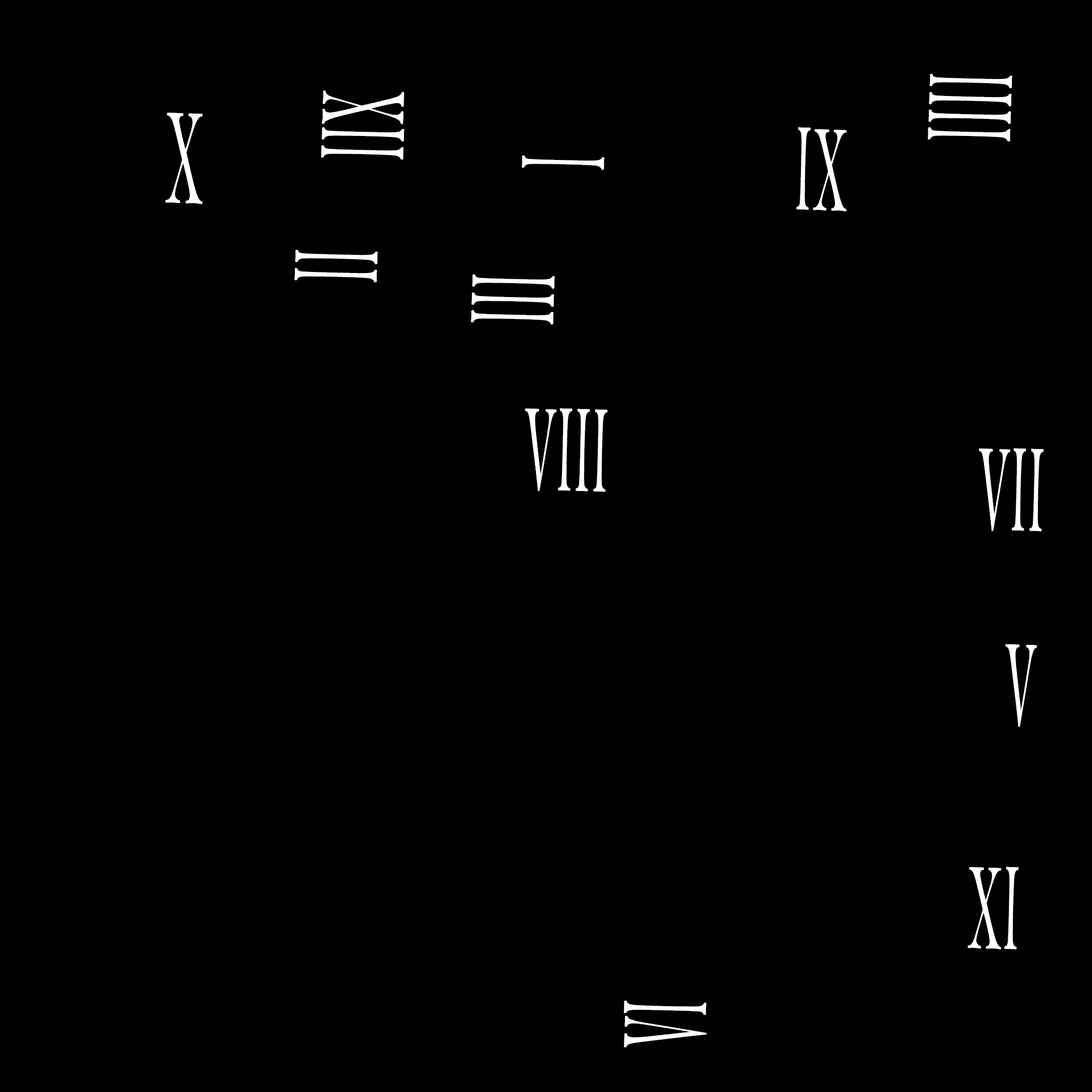
<style>
.page{position:relative;width:1092px;height:1092px;background:#000000}
.page>*{position:absolute;margin:0}
.t1{font:127.1px "BellMT";color:#ffffff;scale:0.37 1}
.t2{font:141.3px "BellMT";color:#ffffff;scale:0.37 1}
</style>
<div class="page">
<p class="t1" style="left:928px;top:74px;width:85px;height:68px;rotate:92deg">IIII</p>
<p class="t1" style="left:321px;top:91px;width:83px;height:69px;rotate:92deg">XII</p>
<p class="t2" style="left:165px;top:113px;width:38px;height:91px;rotate:2deg">X</p>
<p class="t1" style="left:796px;top:127px;width:51px;height:85px;rotate:2deg">IX</p>
<p class="t1" style="left:521px;top:155px;width:84px;height:15px;rotate:92deg">I</p>
<p class="t1" style="left:294px;top:250px;width:84px;height:33px;rotate:92deg">II</p>
<p class="t1" style="left:471px;top:274px;width:84px;height:51px;rotate:92deg">III</p>
<p class="t1" style="left:525px;top:408px;width:83px;height:84px;rotate:2deg">VIII</p>
<p class="t1" style="left:978px;top:448px;width:66px;height:84px;rotate:2deg">VII</p>
<p class="t1" style="left:1005px;top:644px;width:32px;height:83px;rotate:2deg">V</p>
<p class="t1" style="left:968px;top:866px;width:51px;height:84px;rotate:2deg">XI</p>
<p class="t1" style="left:624px;top:1000px;width:82px;height:48px;rotate:-88deg">VI</p>
</div>
